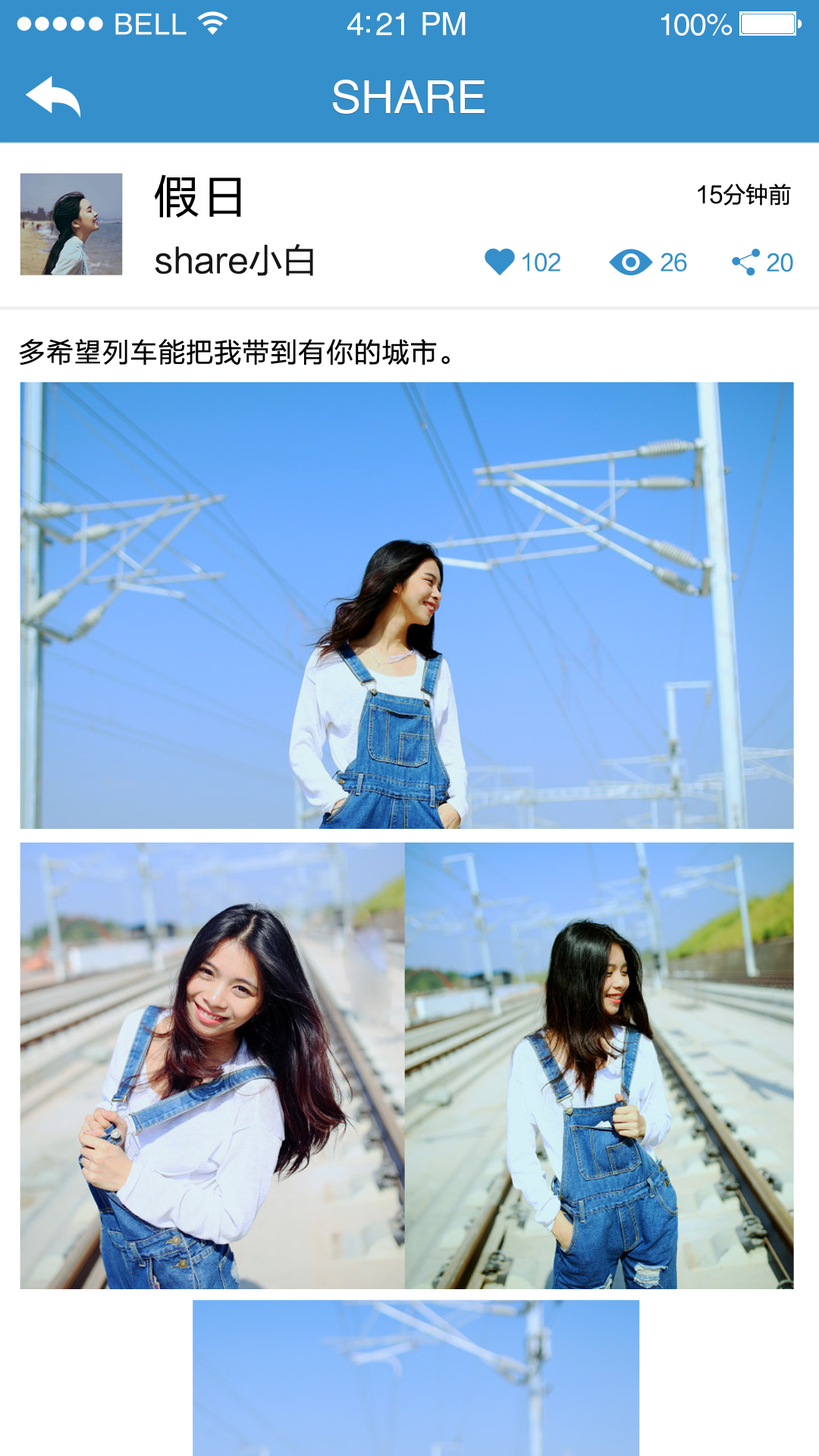
<style>
.page{position:relative;width:819px;height:1456px;background:#ffffff}
.page>*{position:absolute;margin:0}
.t1{font:29.3px "Helvetica";letter-spacing:0.02em;color:#ffffff}
.t2{font:31.8px "Helvetica";letter-spacing:-0.02em;color:#ffffff}
.t3{font:30.6px "Helvetica";letter-spacing:-0.02em;color:#ffffff}
.t4{font:45.5px "Helvetica";color:#ffffff}
.t5{font:45.5px "FZLTHJW--GB1-0";letter-spacing:0.075em;color:#000000}
.t6{font:22.7px "FZLTHJW--GB1-0";color:#000000}
.t7{font:34.1px "FZLTHJW--GB1-0";color:#171717}
.t8{font:22.7px "FZLTHJW--GB1-0";color:#358fcb}
.t9{font:27.3px "FZLTHJW--GB1-0";letter-spacing:0.025em;color:#010000}
</style>
<div class="page">
<p class="t1" style="left:115px;top:13px;width:72px;height:22px">BELL</p>
<p class="t2" style="left:347px;top:12px;width:119px;height:24px">4:21 PM</p>
<p class="t3" style="left:661px;top:14px;width:72px;height:22px">100%</p>
<p class="t4" style="left:332px;top:80px;width:153px;height:34px">SHARE</p>
<p class="t5" style="left:154px;top:174px;width:87px;height:44px">假日</p>
<p class="t6" style="left:698px;top:184px;width:93px;height:22px">15分钟前</p>
<p class="t7" style="left:155px;top:243px;width:158px;height:33px">share小白</p>
<p class="t8" style="left:522px;top:253px;width:38px;height:18px">102</p>
<p class="t8" style="left:660px;top:253px;width:27px;height:18px">26</p>
<p class="t8" style="left:767px;top:253px;width:26px;height:19px">20</p>
<p class="t9" style="left:19px;top:339px;width:431px;height:27px">多希望列车能把我带到有你的城市。</p>
</div>
